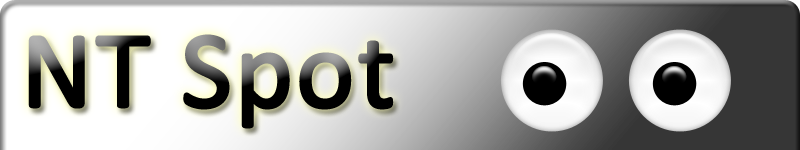
<style>
.page{position:relative;width:800px;height:150px}
.page>*{position:absolute;margin:0}
.t1{font:111px "Calibri";font-weight:bold}
</style>
<div class="page">
<p class="t1" style="left:28px;top:34px;width:366px;height:95px">NT Spot</p>
</div>
